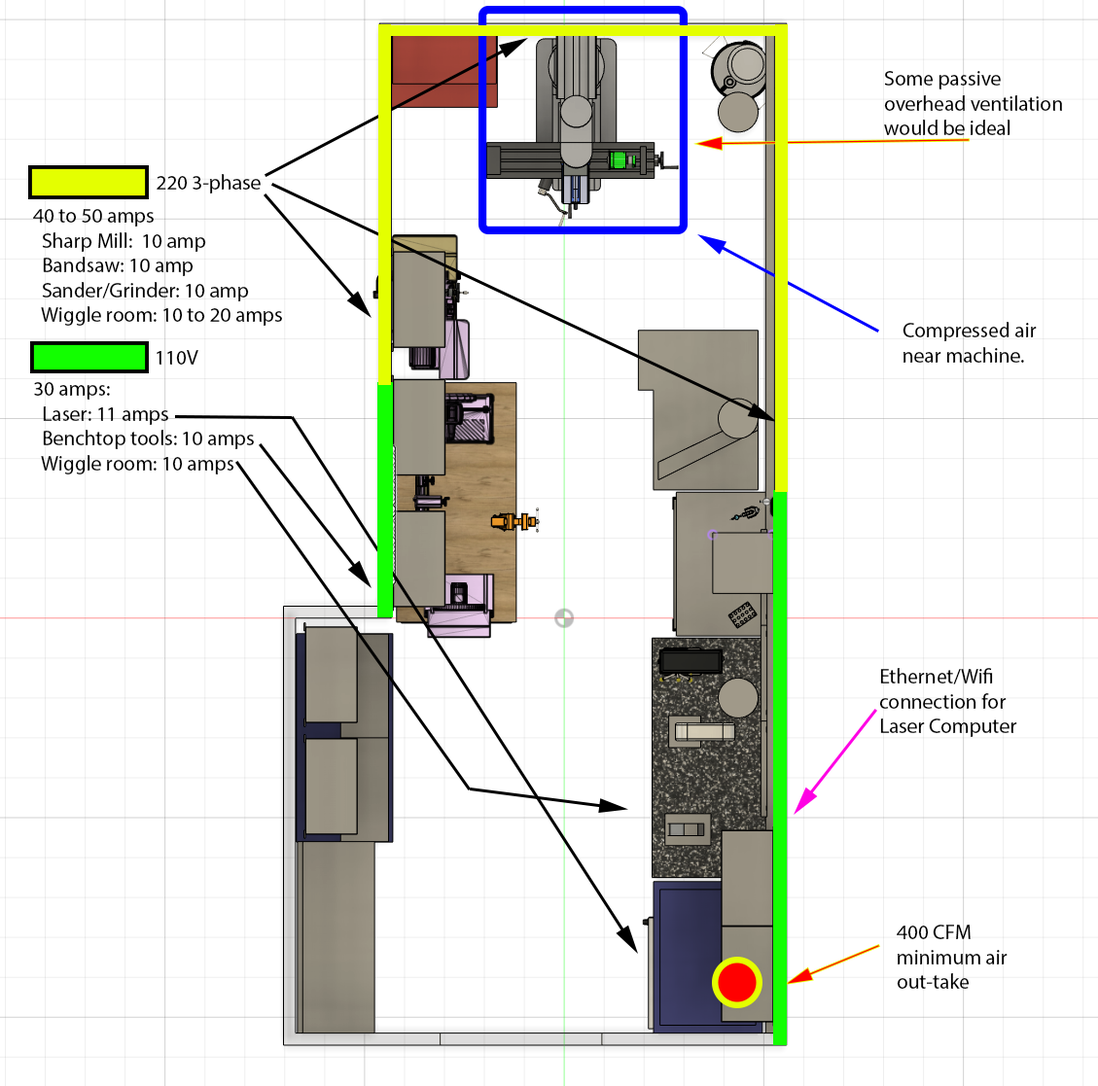
<style>
.page{position:relative;width:1098px;height:1086px;background:#ffffff}
.page>*{position:absolute;margin:0}
.t1{font:20.7px "MyriadPro-Regular";color:#000000}
</style>
<div class="page">
<p class="t1" style="left:884px;top:71px;width:178px;height:64px">Some passive<br>overhead ventilation<br>would be ideal</p>
<p class="t1" style="left:157px;top:174px;width:104px;height:20px">220 3-phase</p>
<p class="t1" style="left:33px;top:209px;width:249px;height:117px">40 to 50 amps<br>  Sharp Mill:  10 amp<br>  Bandsaw: 10 amp<br>  Sander/Grinder: 10 amp<br>  Wiggle room: 10 to 20 amps</p>
<p class="t1" style="left:902px;top:322px;width:135px;height:41px">Compressed air<br>near machine.</p>
<p class="t1" style="left:157px;top:350px;width:41px;height:15px">110V</p>
<p class="t1" style="left:34px;top:382px;width:220px;height:93px">30 amps:<br>  Laser: 11 amps<br>  Benchtop tools: 10 amps<br>  Wiggle room: 10 amps</p>
<p class="t1" style="left:879px;top:668px;width:138px;height:69px">Ethernet/Wifi<br>connection for<br>Laser Computer</p>
<p class="t1" style="left:897px;top:925px;width:110px;height:64px">400 CFM <br>minimum air<br>out-take</p>
</div>
